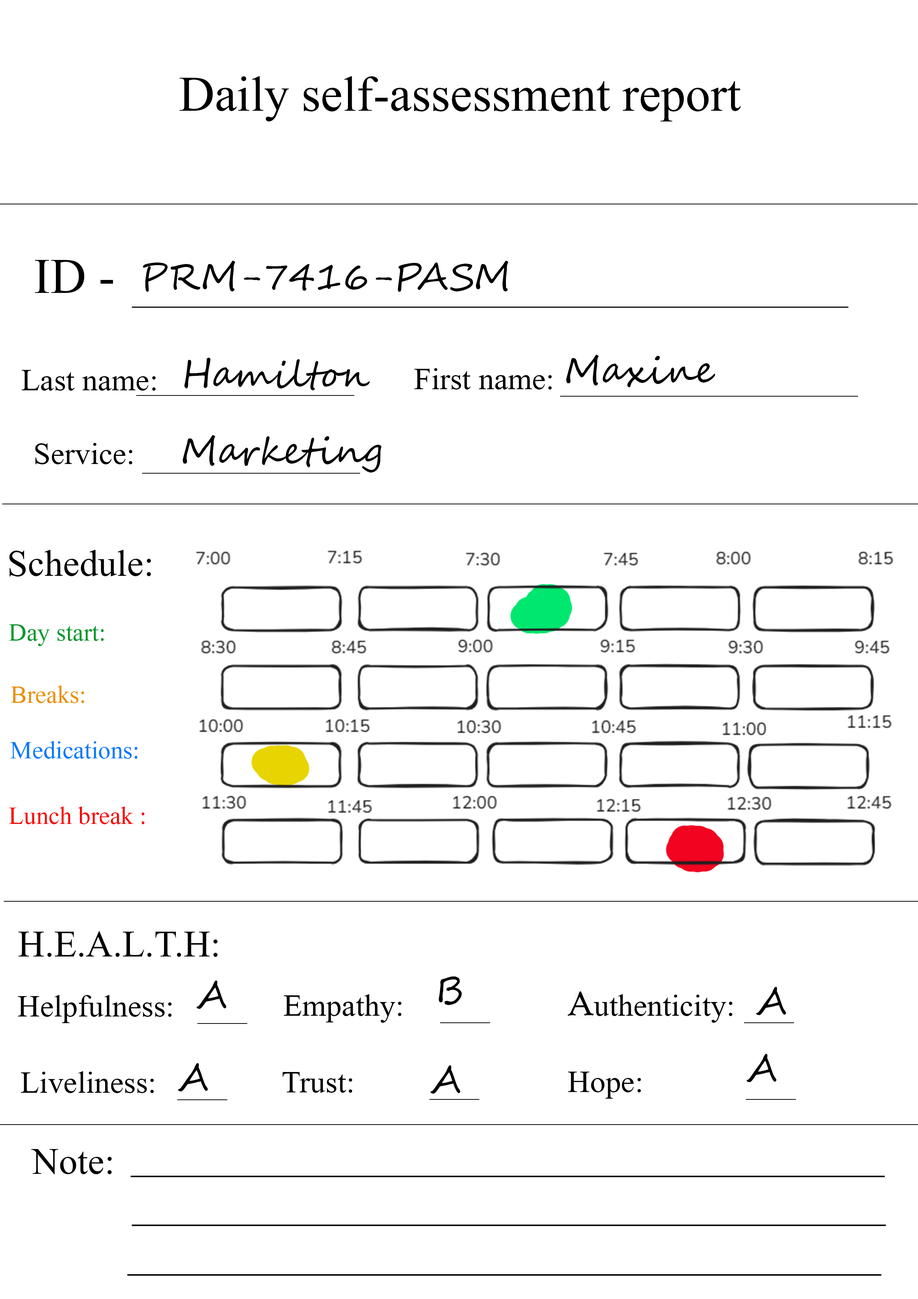
<style>
.page{position:relative;width:918px;height:1299px;background:#ffffff}
.page>*{position:absolute;margin:0}
.t1{font:74px "Microsoft-Himalaya";color:#000000}
.t2{font:37px "SegoeScript";color:#000000}
.t3{font:46.3px "Microsoft-Himalaya";color:#000000}
.t4{font:55.5px "Microsoft-Himalaya";color:#000000}
.t5{font:37px "Microsoft-Himalaya";color:#00982b}
.t6{font:37px "Microsoft-Himalaya";color:#ea8f00}
.t7{font:37px "Microsoft-Himalaya";color:#0078ff}
.t8{font:37px "Microsoft-Himalaya";color:#f90000}
.t9{font:37px "HighTowerText-Reg";color:#000000}
</style>
<div class="page">
<p class="t1" style="left:180px;top:76px;width:561px;height:45px">Daily self-assessment report</p>
<p class="t1" style="left:35px;top:260px;width:78px;height:33px">ID -</p>
<p class="t2" style="left:143px;top:261px;width:366px;height:31px">PRM-7416-PASM</p>
<p class="t2" style="left:184px;top:358px;width:186px;height:32px">Hamilton</p>
<p class="t2" style="left:566px;top:355px;width:149px;height:32px">Maxine</p>
<p class="t3" style="left:21px;top:370px;width:135px;height:21px">Last name:</p>
<p class="t3" style="left:414px;top:368px;width:138px;height:21px">First name:</p>
<p class="t2" style="left:183px;top:435px;width:199px;height:37px">Marketing</p>
<p class="t3" style="left:35px;top:443px;width:98px;height:21px">Service:</p>
<p class="t4" style="left:9px;top:550px;width:142px;height:26px">Schedule:</p>
<p class="t5" style="left:9px;top:624px;width:95px;height:22px">Day start:</p>
<p class="t6" style="left:11px;top:685px;width:73px;height:18px">Breaks:</p>
<p class="t7" style="left:10px;top:741px;width:128px;height:18px">Medications:</p>
<p class="t8" style="left:9px;top:806px;width:136px;height:18px">Lunch break :</p>
<p class="t4" style="left:18px;top:931px;width:200px;height:26px">H.E.A.L.T.H:</p>
<p class="t2" style="left:439px;top:976px;width:23px;height:29px">B</p>
<p class="t2" style="left:197px;top:980px;width:30px;height:29px">A</p>
<p class="t2" style="left:756px;top:987px;width:30px;height:28px">A</p>
<p class="t3" style="left:18px;top:995px;width:154px;height:28px">Helpfulness:</p>
<p class="t3" style="left:284px;top:994px;width:118px;height:29px">Empathy:</p>
<p class="t9" style="left:568px;top:991px;width:26px;height:25px">A</p>
<p class="t3" style="left:581px;top:994px;width:152px;height:29px">authenticity:</p>
<p class="t2" style="left:747px;top:1054px;width:30px;height:28px">A</p>
<p class="t3" style="left:21px;top:1071px;width:133px;height:22px">Liveliness:</p>
<p class="t2" style="left:178px;top:1063px;width:30px;height:28px">A</p>
<p class="t3" style="left:282px;top:1072px;width:70px;height:21px">Trust:</p>
<p class="t2" style="left:431px;top:1065px;width:30px;height:29px">A</p>
<p class="t3" style="left:568px;top:1071px;width:73px;height:27px">Hope:</p>
<p class="t4" style="left:31px;top:1149px;width:81px;height:25px">Note:</p>
</div>
